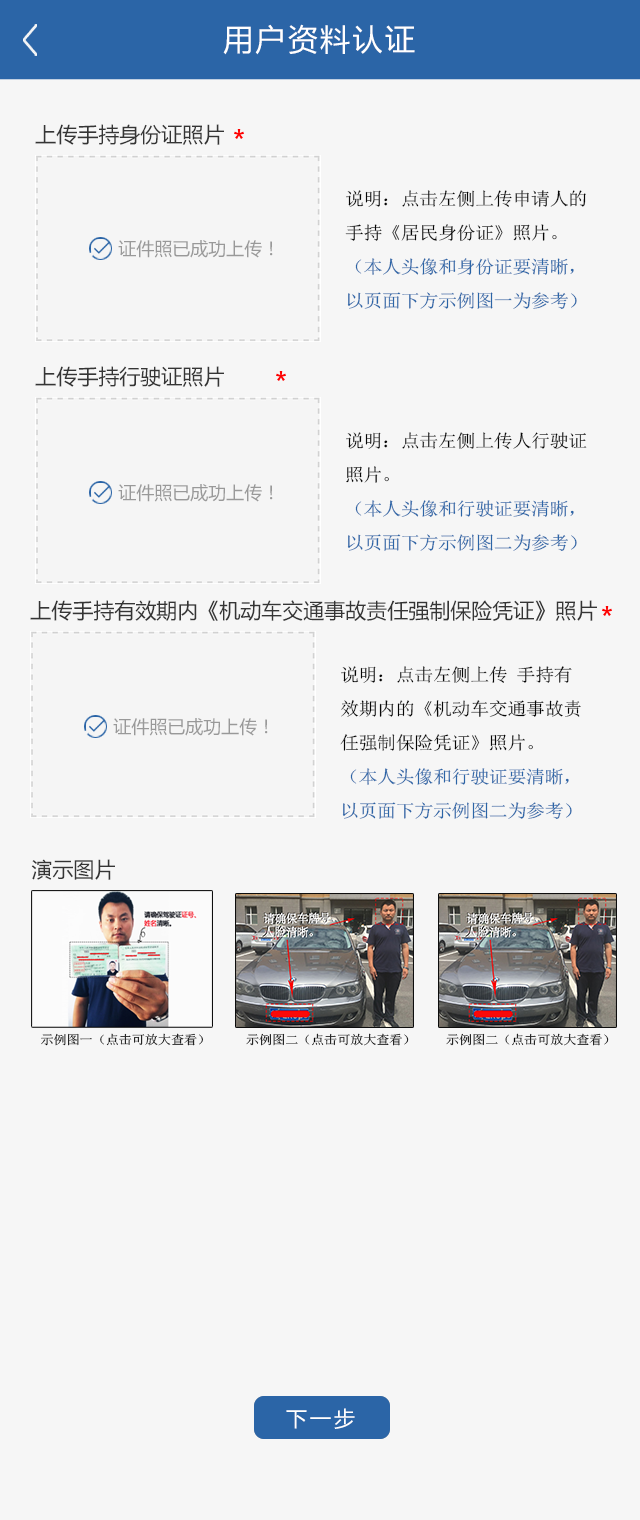
<style>
.page{position:relative;width:640px;height:1520px;background:#f6f6f6}
.page>*{position:absolute;margin:0}
.t1{font:30px "MicrosoftYaHei";letter-spacing:0.08em;color:#ffffff}
.t2{font:21px "MicrosoftYaHei";color:#353535}
.t3{font:18px/34px "SimSun";letter-spacing:-0.02em;color:#2b65a7;scale:1.06 1}
.t4{font:18px/34px "SimSun";letter-spacing:-0.02em;color:#060606;scale:1.06 1}
.t5{font:18px "MicrosoftYaHei";color:#999999}
.t6{font:12.6px "SimSun";letter-spacing:-0.02em;color:#000000;scale:1.06 1}
.t7{font:21px "MicrosoftYaHei";letter-spacing:0.14em;color:#ffffff}
</style>
<div class="page">
<p class="t1" style="left:223px;top:24px;width:192px;height:31px">用户资料认证</p>
<p class="t2" style="left:35px;top:124px;width:189px;height:21px">上传手持身份证照片</p>
<p class="t3" style="left:345px;top:190px;width:241px;height:119px"><span class="t4">说明：点击左侧上传申请人的手持《居民身份证》照片。<br></span>（本人头像和身份证要清晰，以页面下方示例图一为参考）</p>
<p class="t5" style="left:118px;top:240px;width:155px;height:18px">证件照已成功上传！</p>
<p class="t2" style="left:35px;top:366px;width:189px;height:21px">上传手持行驶证照片</p>
<p class="t3" style="left:346px;top:432px;width:241px;height:119px"><span class="t4">说明：点击左侧上传人行驶证照片。<br></span>（本人头像和行驶证要清晰，以页面下方示例图二为参考）</p>
<p class="t5" style="left:118px;top:484px;width:155px;height:18px">证件照已成功上传！</p>
<p class="t2" style="left:30px;top:600px;width:567px;height:21px">上传手持有效期内《机动车交通事故责任强制保险凭证》照片</p>
<p class="t4" style="left:340px;top:666px;width:241px;height:153px">说明：点击左侧上传 手持有效期内的《机动车交通事故责任强制保险凭证》照片。<br><span class="t3">（本人头像和行驶证要清晰，以页面下方示例图二为参考）</span></p>
<p class="t5" style="left:113px;top:718px;width:155px;height:18px">证件照已成功上传！</p>
<p class="t2" style="left:31px;top:859px;width:84px;height:21px">演示图片</p>
<p class="t6" style="left:41px;top:1033px;width:162px;height:13px">示例图一（点击可放大查看）</p>
<p class="t6" style="left:246px;top:1033px;width:163px;height:13px">示例图二（点击可放大查看）</p>
<p class="t6" style="left:446px;top:1033px;width:163px;height:13px">示例图二（点击可放大查看）</p>
<p class="t7" style="left:286px;top:1408px;width:69px;height:21px">下一步</p>
</div>
